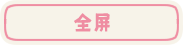
<style>
.page{position:relative;width:183px;height:45px;background:#f7f3e9}
.page>*{position:absolute;margin:0}
.t1{font:12px "shetumodengxiaofangti";color:#ef8da2;font-weight:bold;scale:0.94 1}
</style>
<div class="page">
<p class="t1" style="left:74px;top:13px;width:36px;height:19px">全屏</p>
</div>
